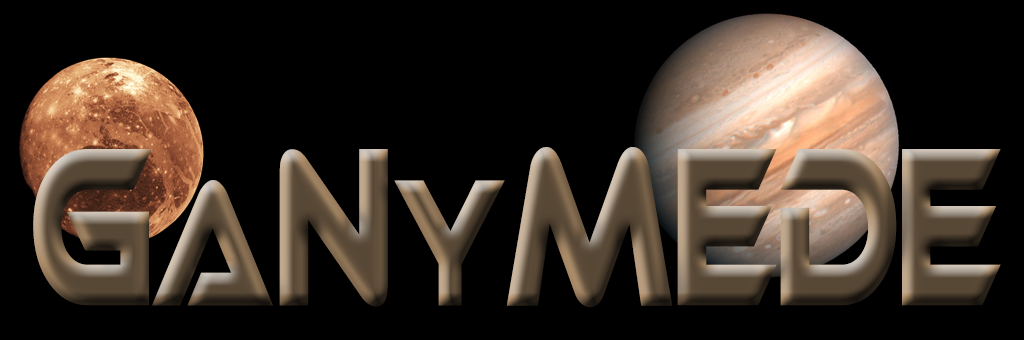
<style>
.page{position:relative;width:1024px;height:340px;background:#000000}
.page>*{position:absolute;margin:0}
.t1{font:216.6px "Ethnocentric";scale:0.58 1}
.t2{font:173.2px "Ethnocentric";scale:0.58 1}
</style>
<div class="page">
<p class="t1" style="left:33px;top:147px;width:968px;height:161px">G<span class="t2">a</span>N<span class="t2">y</span>MEDE</p>
</div>
